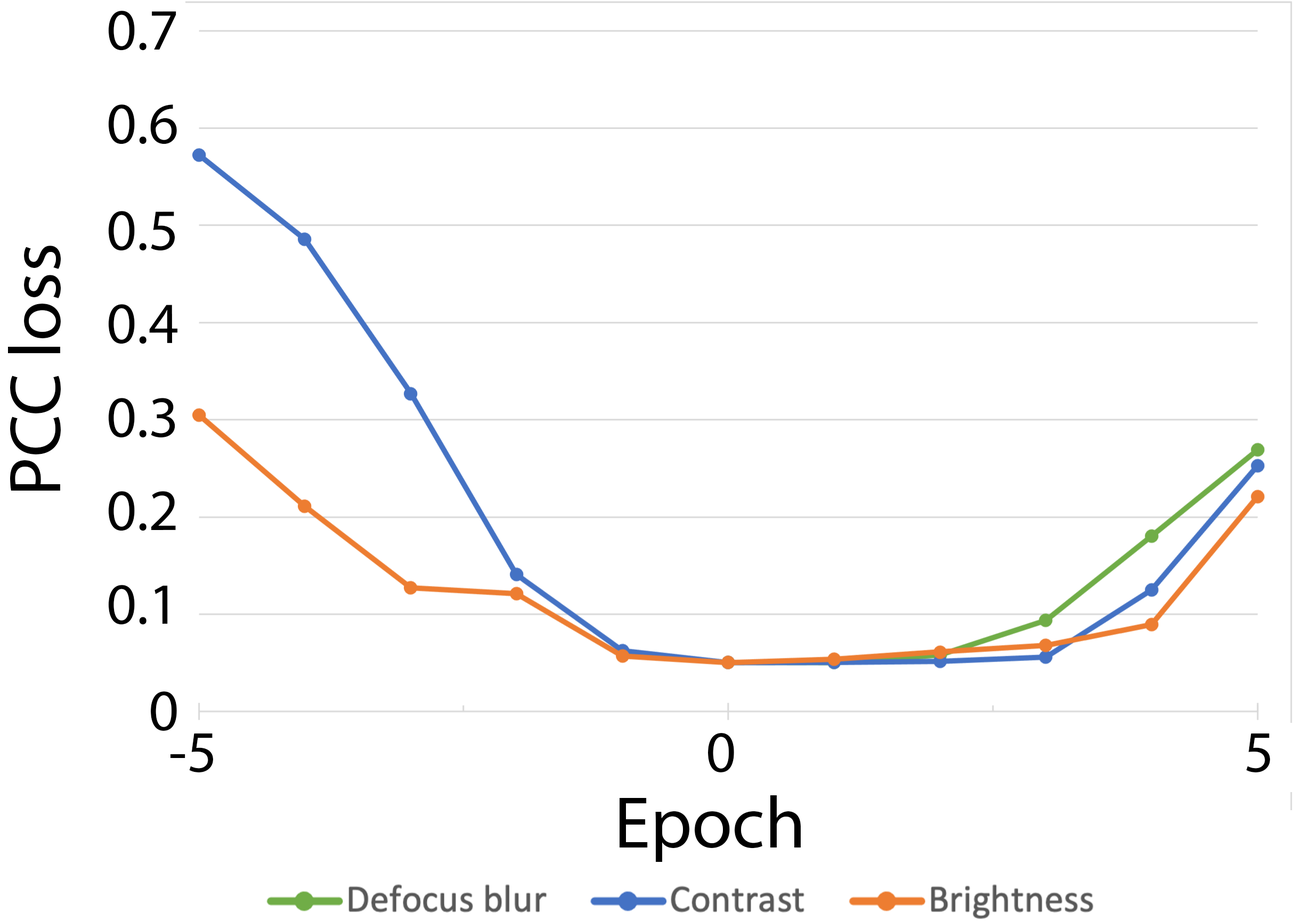
<style>
.page{position:relative;width:1294px;height:921px;background:#ffffff}
.page>*{position:absolute;margin:0}
.t1{font:58.6px "MyriadPro-Regular";color:#000000}
.t2{font:73.3px "MyriadPro-Regular";color:#000000}
</style>
<div class="page">
<p class="t1" style="left:108px;top:11px;width:68px;height:40px">0.7</p>
<p class="t1" style="left:108px;top:104px;width:69px;height:40px">0.6</p>
<p class="t1" style="left:108px;top:211px;width:67px;height:40px">0.5</p>
<p class="t2" style="left:8px;top:246px;width:53px;height:245px;rotate:-90deg">PCC loss</p>
<p class="t1" style="left:108px;top:304px;width:69px;height:40px">0.4</p>
<p class="t1" style="left:108px;top:398px;width:67px;height:40px">0.3</p>
<p class="t1" style="left:108px;top:491px;width:68px;height:40px">0.2</p>
<p class="t1" style="left:108px;top:585px;width:60px;height:40px">0.1</p>
<p class="t1" style="left:151px;top:692px;width:26px;height:39px">0</p>
<p class="t1" style="left:171px;top:733px;width:42px;height:40px">-5</p>
<p class="t1" style="left:708px;top:733px;width:26px;height:40px">0</p>
<p class="t1" style="left:1246px;top:733px;width:24px;height:40px">5</p>
<p class="t2" style="left:620px;top:796px;width:181px;height:66px">Epoch</p>
</div>
